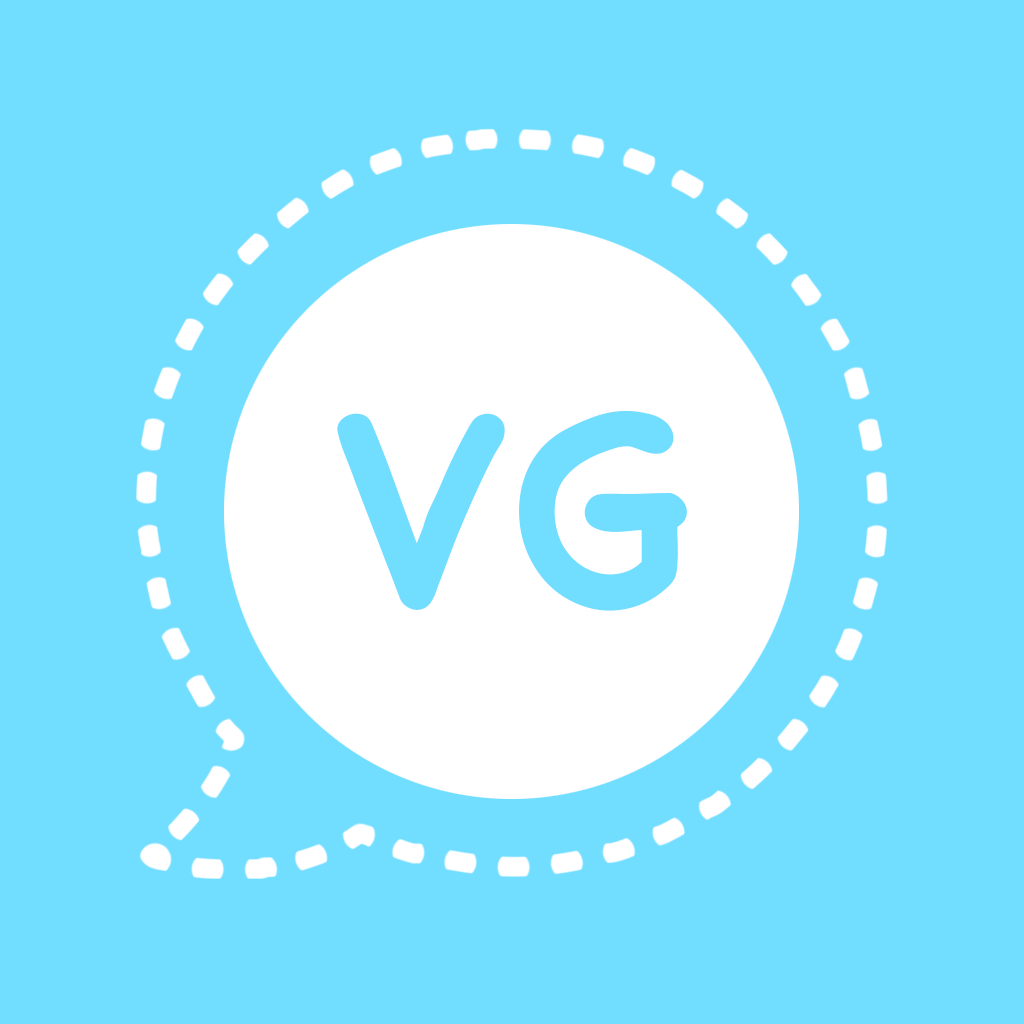
<style>
.page{position:relative;width:1024px;height:1024px;background:#71ddff}
.page>*{position:absolute;margin:0}
.t1{font:266.8px "ChalkboardSE-Bold";color:#71ddff}
</style>
<div class="page">
<p class="t1" style="left:337px;top:410px;width:350px;height:201px">VG</p>
</div>
